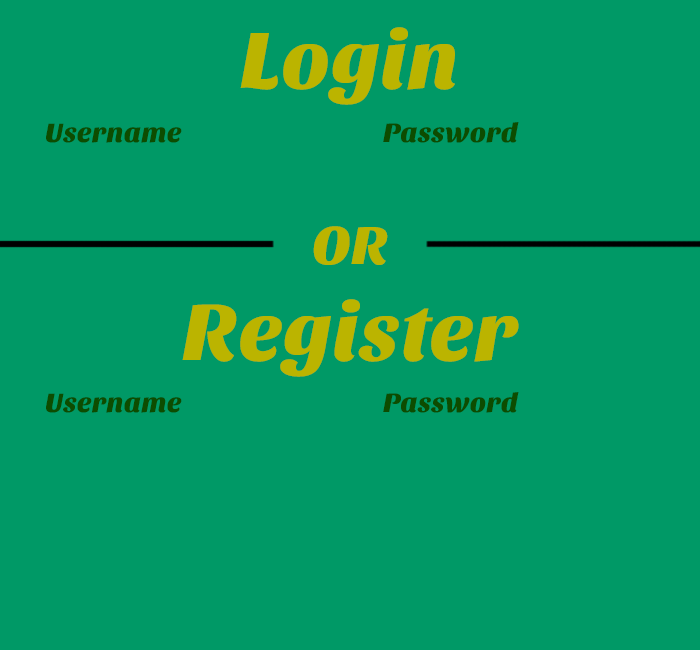
<style>
.page{position:relative;width:700px;height:650px;background:#009966}
.page>*{position:absolute;margin:0}
.t1{font:83.3px "SansitaOne";color:#bbb400}
.t2{font:27.8px "SansitaOne";color:#0d4c00}
.t3{font:55.6px "SansitaOne";color:#bbb400}
</style>
<div class="page">
<p class="t1" style="left:240px;top:27px;width:215px;height:78px">Login</p>
<p class="t2" style="left:46px;top:123px;width:136px;height:20px">Username</p>
<p class="t2" style="left:383px;top:122px;width:136px;height:21px">Password</p>
<p class="t3" style="left:313px;top:226px;width:75px;height:39px">OR</p>
<p class="t1" style="left:182px;top:299px;width:337px;height:78px">Register</p>
<p class="t2" style="left:46px;top:393px;width:136px;height:20px">Username</p>
<p class="t2" style="left:383px;top:392px;width:136px;height:21px">Password</p>
</div>
